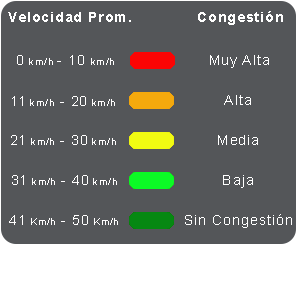
<style>
.page{position:relative;width:300px;height:305px;background:#545659}
.page>*{position:absolute;margin:0}
.t1{font:14px "Arial-BoldMT";letter-spacing:0.075em;color:#ffffff}
.t2{font:10px "ArialMT";letter-spacing:0.075em;color:#fffefe}
.t3{font:14px "ArialMT";letter-spacing:0.075em;color:#fffefe}
.t4{font:14px "ArialMT";letter-spacing:0.075em;color:#ffffff}
</style>
<div class="page">
<p class="t1" style="left:8px;top:12px;width:123px;height:10px">Velocidad Prom.</p>
<p class="t1" style="left:198px;top:11px;width:85px;height:14px">Congestión</p>
<p class="t2" style="left:17px;top:55px;width:97px;height:10px"><span class="t3">0 </span>km/h <span class="t3">- 10 </span>km/h</p>
<p class="t4" style="left:210px;top:55px;width:59px;height:13px">Muy Alta</p>
<p class="t2" style="left:12px;top:96px;width:103px;height:10px"><span class="t3">11</span> km/h<span class="t3"> - 20</span> km/h</p>
<p class="t4" style="left:224px;top:95px;width:27px;height:10px">Alta</p>
<p class="t2" style="left:11px;top:135px;width:105px;height:10px"><span class="t3">21</span> km/h<span class="t3"> - 30</span> km/h</p>
<p class="t4" style="left:218px;top:135px;width:40px;height:10px">Media</p>
<p class="t2" style="left:12px;top:175px;width:105px;height:10px"><span class="t3">31</span> km/h<span class="t3"> - 40</span> km/h</p>
<p class="t4" style="left:223px;top:175px;width:30px;height:13px">Baja</p>
<p class="t2" style="left:9px;top:215px;width:109px;height:10px"><span class="t3">41</span> Km/h<span class="t3"> - 50</span> Km/h</p>
<p class="t4" style="left:185px;top:214px;width:107px;height:14px">Sin Congestión</p>
</div>
